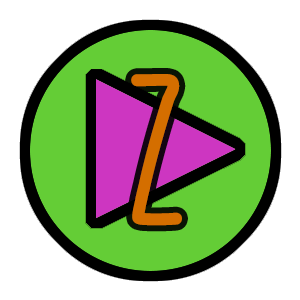
<style>
.page{position:relative;width:300px;height:300px;background:#ffffff}
.page>*{position:absolute;margin:0}
.t1{font:200px "Engine-Regular";color:#d46e00}
</style>
<div class="page">
<p class="t1" style="left:131px;top:74px;width:51px;height:152px">Z</p>
</div>
